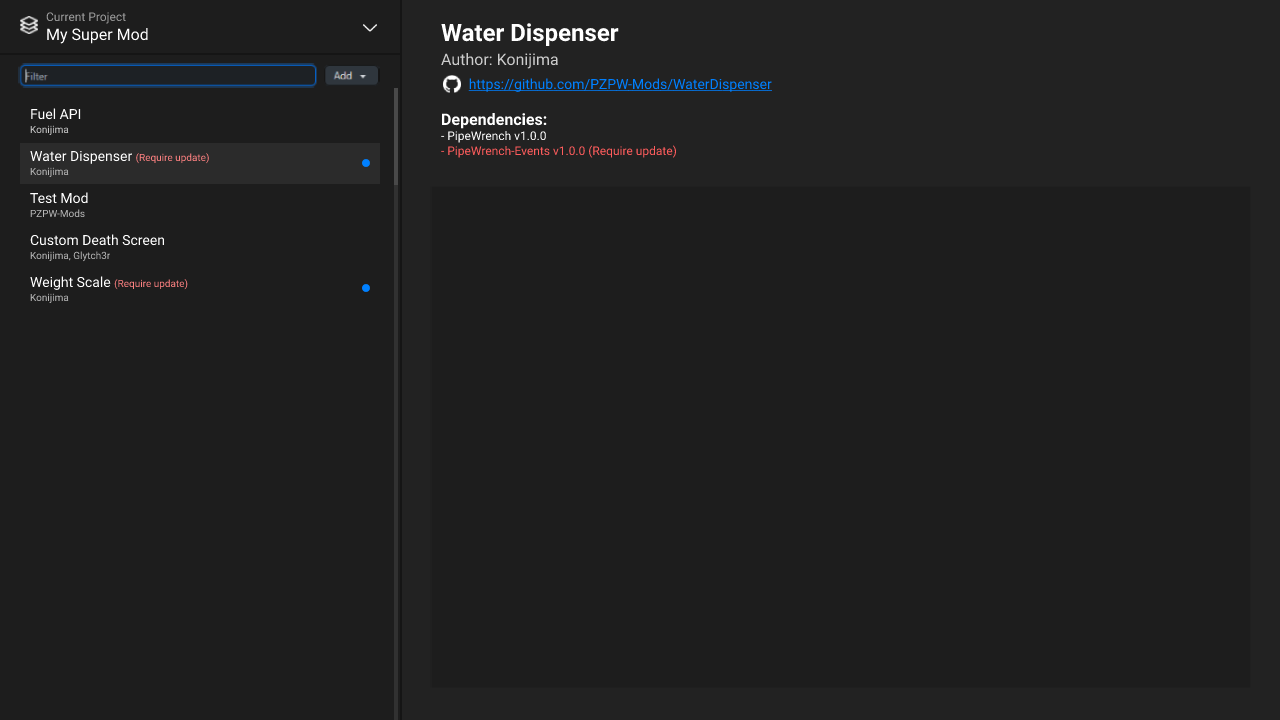
<style>
.page{position:relative;width:1280px;height:720px;background:#1d1d1d}
.page>*{position:absolute;margin:0}
.t1{font:12px "Roboto-Regular";color:#9c9c9c}
.t2{font:16px "Roboto-Regular";color:#ffffff}
.t3{font:14px/24px "Roboto-Regular";color:#0080ff;text-decoration:underline}
.t4{font:24px/14px "Roboto-Bold";color:#ffffff}
.t5{font:16px/24px "Roboto-Regular";color:#cccccc}
.t6{font:16px/12px "Roboto-Bold";color:#ffffff}
.t7{font:16px/24px "Roboto-Bold";color:#ffffff}
.t8{font:12px/15px "Roboto-Regular";color:#ffffff}
.t9{font:12px/15px "Roboto-Regular";color:#ff5d5d}
.t10{font:14px/14px "Roboto-Regular";color:#ffffff}
.t11{font:10px/14px "Roboto-Regular";color:#cacaca}
.t12{font:10px/14px "Roboto-Regular";color:#ff8282}
.t13{font:10px/14px "Roboto-Regular";color:#b7b7b7}
</style>
<div class="page">
<p class="t1" style="left:46px;top:12px;width:102px;height:32px">Current Project<br><span class="t2">My Super Mod</span></p>
<p class="t3" style="left:441px;top:23px;width:331px;height:135px"><span class="t4">Water Dispenser<br></span><span class="t5">Author: Konijima<br>       </span>https://github.com/PZPW-Mods/WaterDispenser<br><br><span class="t6">Depe</span><span class="t7">ndencies:<br></span><span class="t8">- PipeWrench v1.0.0<br></span><span class="t9">- PipeWrench-Events v1.0.0 (Require update)</span></p>
<p class="t10" style="left:30px;top:108px;width:179px;height:196px">Fuel API<br><span class="t11">Konijima<br><br></span>Water Dispenser <span class="t12">(Require update)<br></span><span class="t13">Konijima<br><br></span>Test Mod<br><span class="t13">PZPW-Mods<br><br></span>Custom Death Screen<br><span class="t13">Konijima, Glytch3r<br><br></span>Weight Scale <span class="t12">(Require update)<br></span><span class="t13">Konijima</span></p>
</div>
